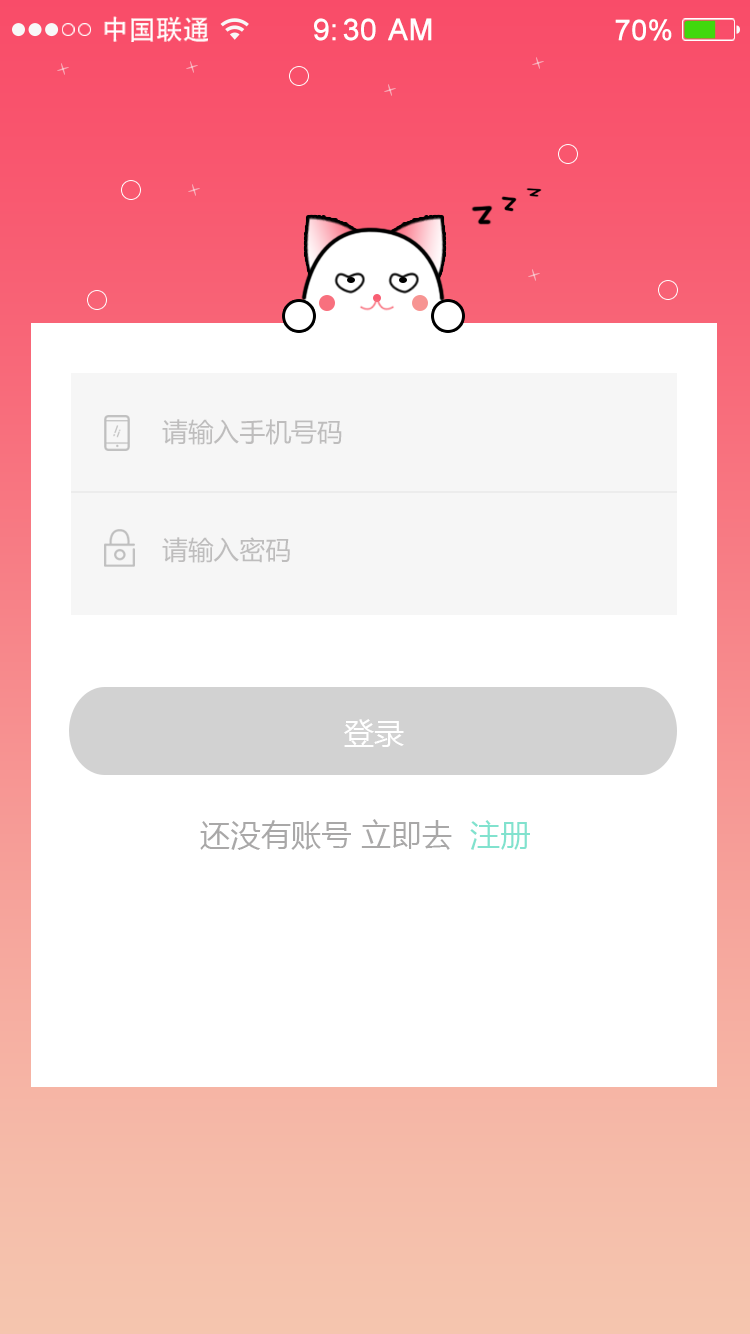
<style>
.page{position:relative;width:750px;height:1334px;background:#ffffff}
.page>*{position:absolute;margin:0}
.t1{font:27.1px "AdobeHeitiStd-Regular";color:#ffffff}
.t2{font:29.5px "ArialMT";color:#ffffff;font-weight:bold}
.t3{font:28.3px "ArialMT";color:#ffffff;font-weight:bold}
.t4{font:26.1px "MicrosoftYaHei";color:#bebdbd}
.t5{font:30px "MicrosoftYaHei";color:#ffffff}
.t6{font:30.6px "MicrosoftYaHei";color:#a9a8a8}
.t7{font:30.6px "MicrosoftYaHei";color:#81e2ce}
</style>
<div class="page">
<p class="t1" style="left:104px;top:16px;width:104px;height:26px">中国联通</p>
<p class="t2" style="left:314px;top:18px;width:118px;height:23px">9:30 AM</p>
<p class="t3" style="left:615px;top:19px;width:57px;height:22px">70%</p>
<p class="t4" style="left:162px;top:419px;width:180px;height:26px">请输入手机号码</p>
<p class="t4" style="left:162px;top:537px;width:128px;height:26px">请输入密码</p>
<p class="t5" style="left:344px;top:719px;width:60px;height:28px">登录</p>
<p class="t6" style="left:200px;top:819px;width:330px;height:31px">还没有账号 立即去  <span class="t7">注册</span></p>
</div>
